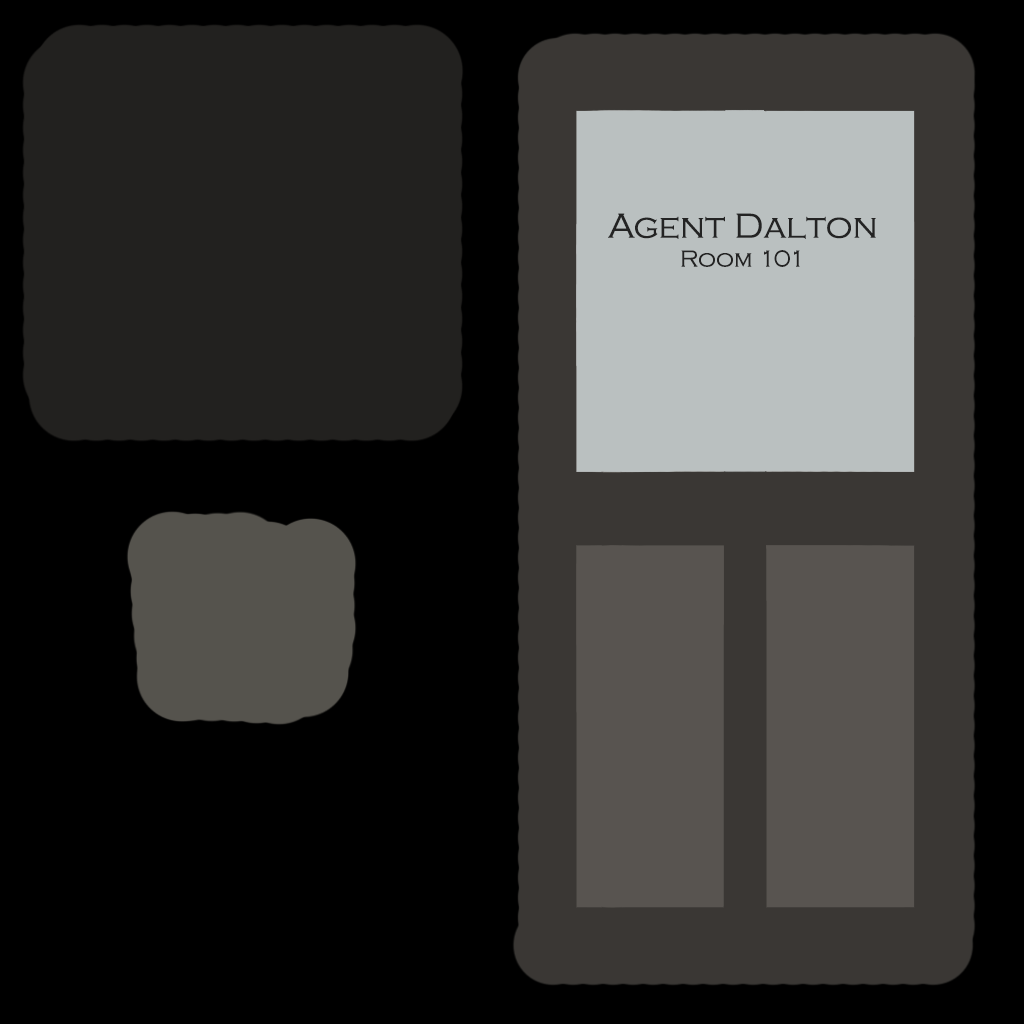
<style>
.page{position:relative;width:1024px;height:1024px;background:#000000}
.page>*{position:absolute;margin:0}
.t1{font:36px "CopperplateGothic-Light";color:#232323}
.t2{font:24px "CopperplateGothic-Light";color:#232323}
</style>
<div class="page">
<p class="t1" style="left:608px;top:213px;width:268px;height:54px;text-align:center">Agent Dalton<br><span class="t2">Room 101</span></p>
</div>
